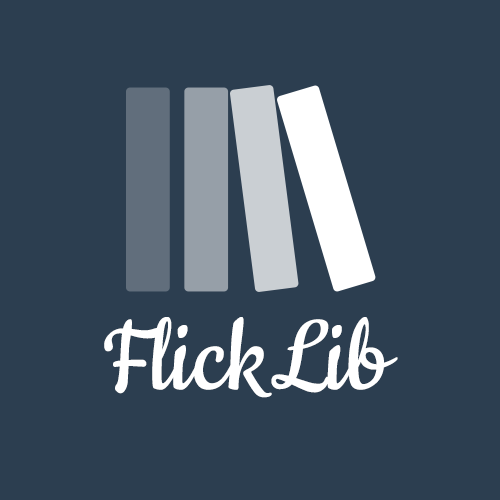
<style>
.page{position:relative;width:500px;height:500px;background:#2c3e50}
.page>*{position:absolute;margin:0}
.t1{font:120px "Cookie-Regular";color:#ffffff}
</style>
<div class="page">
<p class="t1" style="left:104px;top:317px;width:294px;height:81px">FlickLib</p>
</div>
